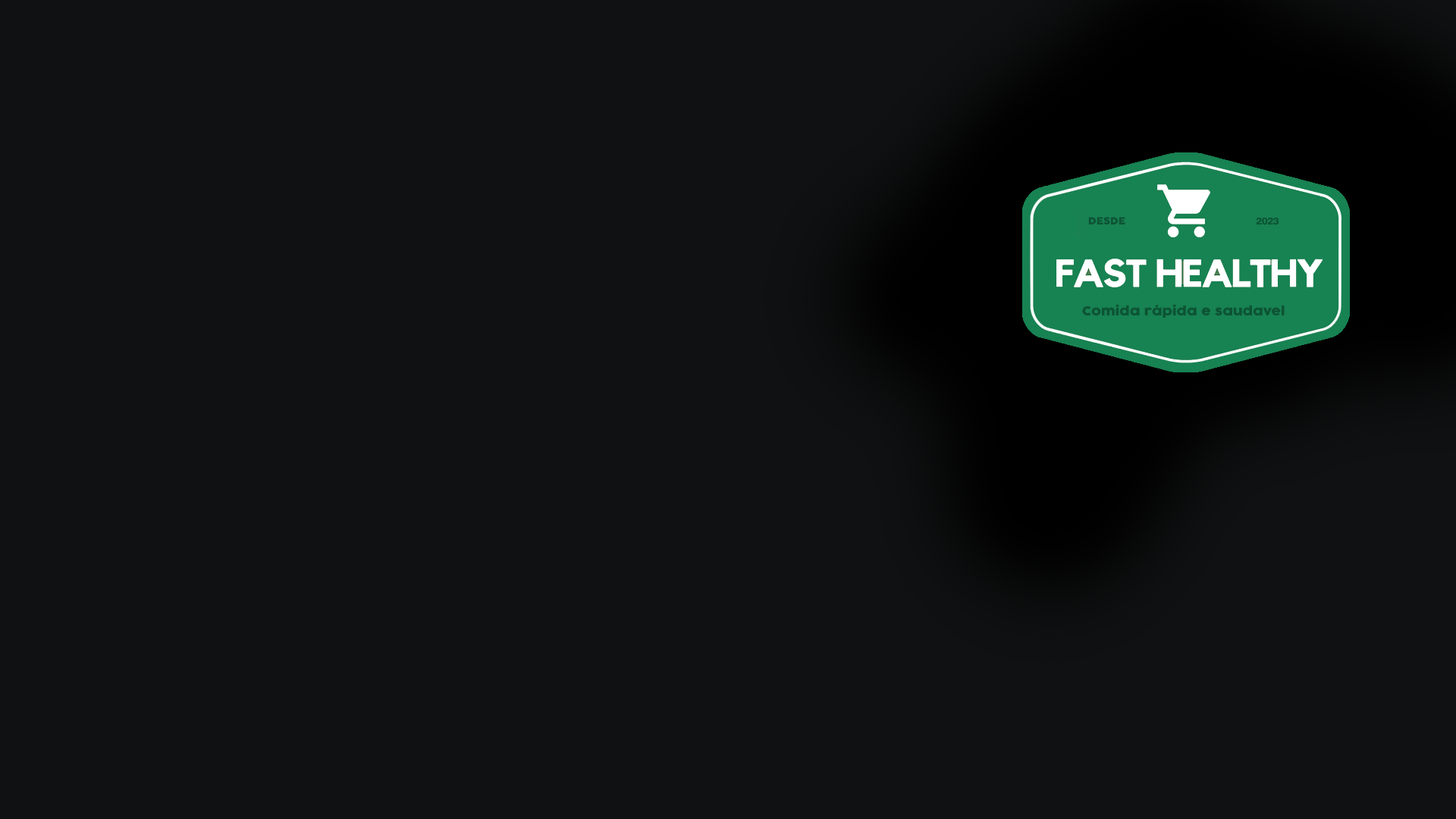
<style>
.page{position:relative;width:1456px;height:819px;background:#101112}
.page>*{position:absolute;margin:0}
.t1{font:9.4px "Cocogoose";color:#0c5434;scale:1.11 1}
.t2{font:9.4px "Couture-Bold";color:#0c5434;scale:1.11 1}
.t3{font:12px "Cocogoose";color:#0c5434;scale:1.11 1}
</style>
<div class="page">
<p class="t1" style="left:1088px;top:217px;width:37px;height:7px">DESDE</p>
<p class="t2" style="left:1256px;top:218px;width:23px;height:7px">2023</p>
<p class="t3" style="left:1082px;top:304px;width:203px;height:14px">Comida rápida e saudavel</p>
</div>
